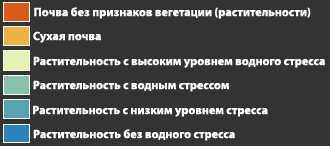
<style>
.page{position:relative;width:330px;height:146px;background:#333333}
.page>*{position:absolute;margin:0}
.t1{font:12px "MyriadPro-Bold";color:#ffffff}
</style>
<div class="page">
<p class="t1" style="left:34px;top:7px;width:277px;height:12px">Почва без признаков вегетации (растительности)</p>
<p class="t1" style="left:33px;top:31px;width:68px;height:12px">Сухая почва</p>
<p class="t1" style="left:33px;top:56px;width:292px;height:12px">Растительность с высоким уровнем водного стресса</p>
<p class="t1" style="left:33px;top:80px;width:196px;height:12px">Растительность с водным стрессом</p>
<p class="t1" style="left:33px;top:105px;width:235px;height:12px">Растительность с низким уровнем стресса</p>
<p class="t1" style="left:33px;top:129px;width:202px;height:12px">Растительность без водного стресса</p>
</div>
